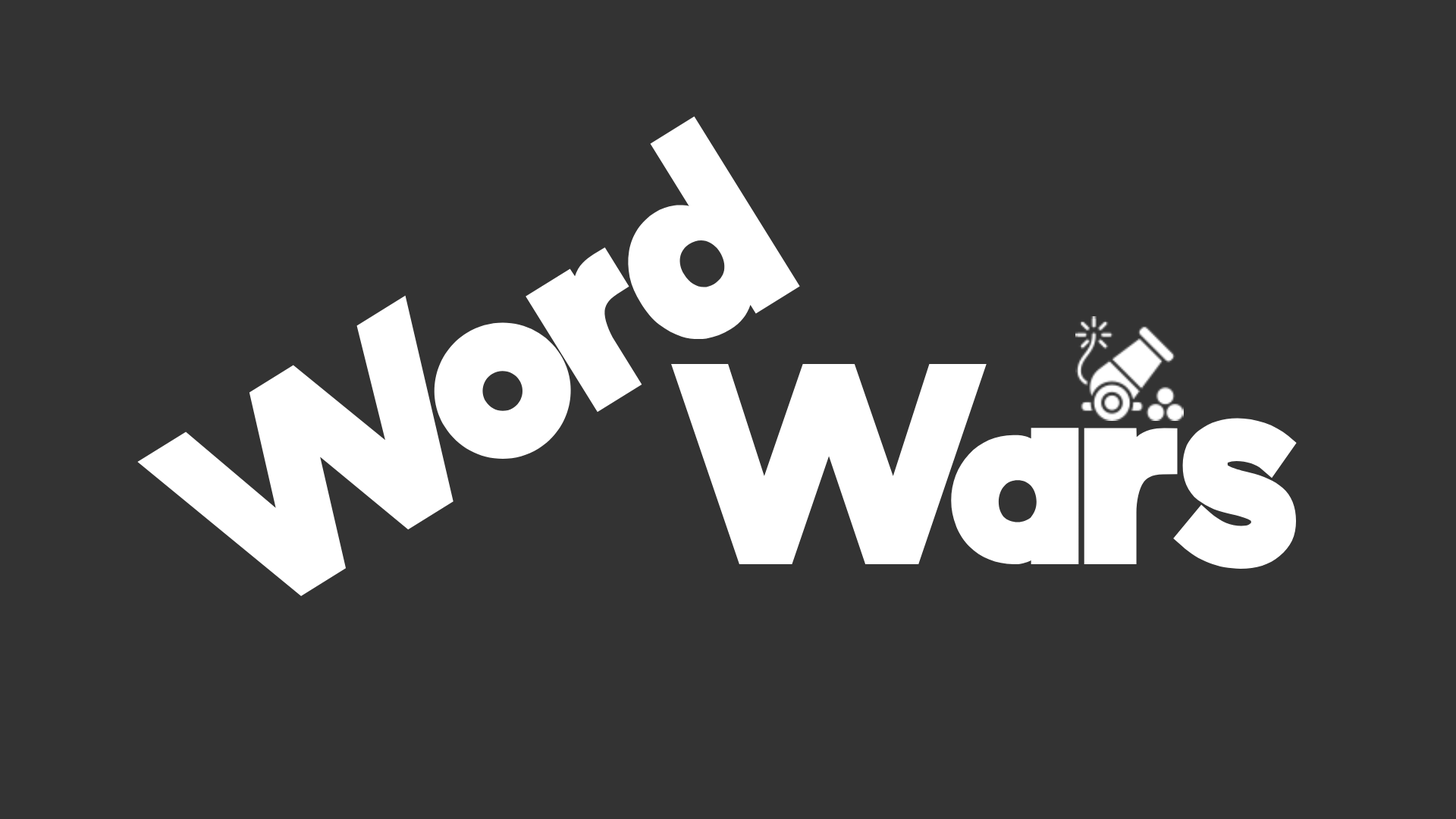
<style>
.page{position:relative;width:1456px;height:819px;background:#333333}
.page>*{position:absolute;margin:0}
.t1{font:235.1px "IndigoRegular-Regular";color:#ffffff}
</style>
<div class="page">
<p class="t1" style="left:137px;top:116px;width:663px;height:480px;rotate:-32deg">Word</p>
<p class="t1" style="left:671px;top:363px;width:626px;height:206px">Wars</p>
</div>
